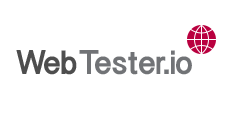
<style>
.page{position:relative;width:233px;height:113px;background:#ffffff}
.page>*{position:absolute;margin:0}
.t1{font:34.7px "MyanmarSangamMN-Bold";letter-spacing:-0.02em;color:#717376}
.t2{font:34.7px "MyanmarSangamMN-Bold";letter-spacing:-0.02em;color:#4e4e4e}
</style>
<div class="page">
<p class="t1" style="left:16px;top:50px;width:176px;height:25px"><span class="t2">Web</span>Tester.io</p>
</div>
